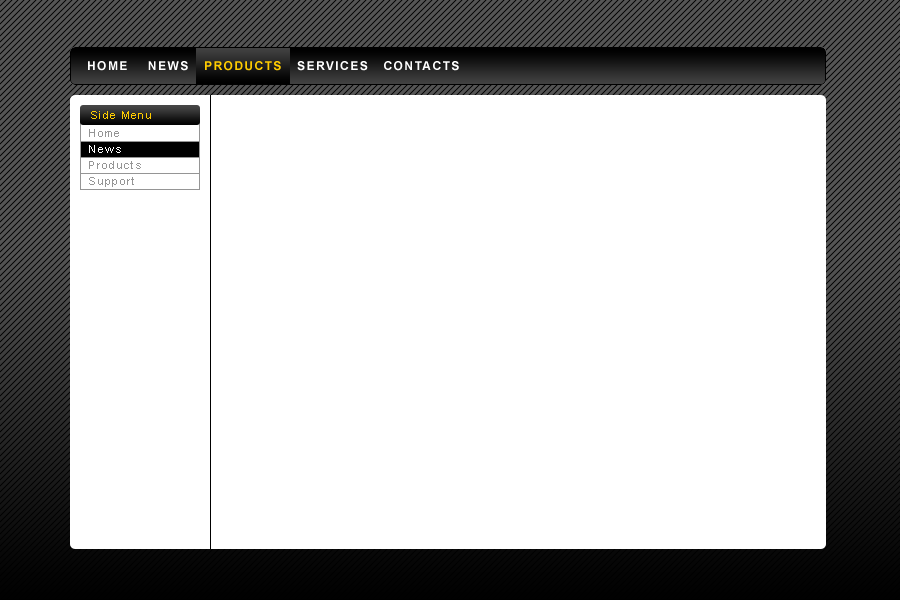
<style>
.page{position:relative;width:900px;height:600px;background:#ffffff}
.page>*{position:absolute;margin:0}
.t1{font:12px "Arial-BoldMT";letter-spacing:0.12em;color:#ffffff}
.t2{font:12px "Arial-BoldMT";letter-spacing:0.12em;color:#ffcc00}
.t3{font:11px "ArialMT";letter-spacing:0.12em;color:#ffcc00}
</style>
<div class="page">
<p class="t1" style="left:88px;top:61px;width:371px;height:10px">HOME    NEWS   <span class="t2">PRODUCTS</span>   SERVICES   CONTACTS</p>
<p class="t3" style="left:91px;top:111px;width:60px;height:8px">Side Menu</p>
</div>
